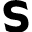
<style>
.page{position:relative;width:32px;height:32px;background:#ffffff}
.page>*{position:absolute;margin:0}
.t1{font:63.1px "Ancillary-Bold";color:#000000}
</style>
<div class="page">
<p class="t1" style="left:3px;top:0px;width:26px;height:33px">s</p>
</div>
